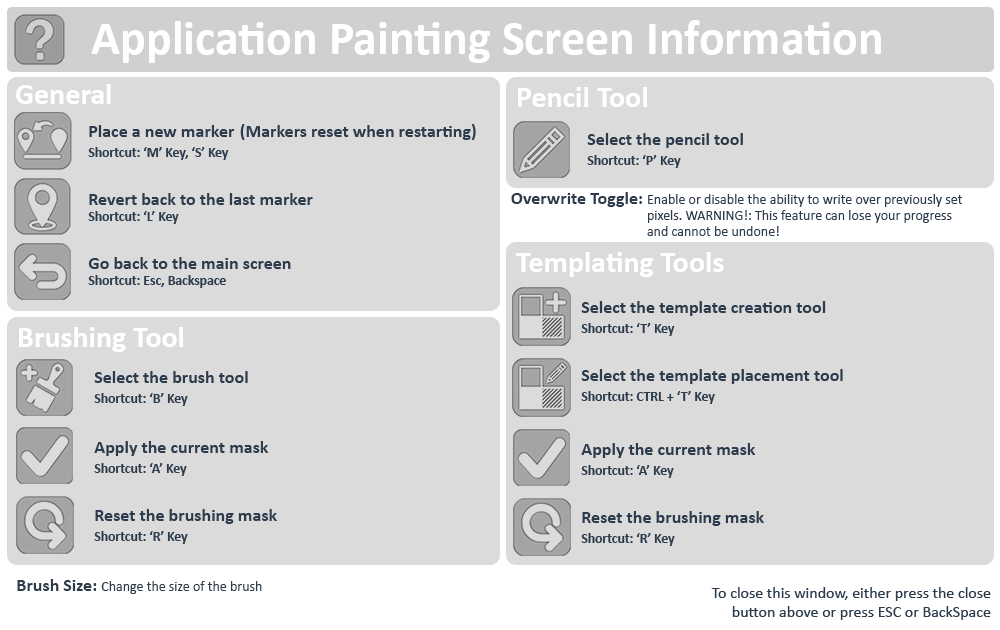
<style>
.page{position:relative;width:1000px;height:630px;background:#dbdbdb}
.page>*{position:absolute;margin:0}
.t1{font:48px "Calibri-Bold";color:#ffffff}
.t2{font:30px "Calibri-Bold";color:#ffffff}
.t3{font:18px/20.4px "Calibri-Bold";color:#2c3c4c}
.t4{font:13.6px/20.4px "Calibri-Bold";color:#2c3c4c}
.t5{font:18px "Calibri-Bold";color:#2c3c4c}
.t6{font:13.6px "Calibri-Bold";color:#2c3c4c}
.t7{font:14px/16px "Calibri";color:#2c3c4c}
.t8{font:18px/16px "Calibri-Bold";color:#2c3c4c}
.t9{font:14px "Calibri";color:#2c3c4c}
.t10{font:16px "Calibri";color:#2c3c4c}
</style>
<div class="page">
<p class="t1" style="left:91px;top:20px;width:790px;height:43px">Application Painting Screen Information</p>
<p class="t2" style="left:16px;top:84px;width:95px;height:20px">General</p>
<p class="t2" style="left:518px;top:87px;width:129px;height:20px">Pencil Tool</p>
<p class="t3" style="left:88px;top:124px;width:388px;height:36px">Place a new marker (Markers reset when restarting)<br><span class="t4">Shortcut: ‘M’ Key, ‘S’ Key</span></p>
<p class="t3" style="left:587px;top:133px;width:156px;height:35px">Select the pencil tool<br><span class="t4">Shortcut: ‘P’ Key</span></p>
<p class="t5" style="left:88px;top:193px;width:225px;height:31px">Revert back to the last marker<br><span class="t6">Shortcut: ‘L’ Key</span></p>
<p class="t7" style="left:511px;top:192px;width:452px;height:44px"><span class="t8">Overwrite Toggle: </span>Enable or disable the ability to write over previously set<br>                                           pixels. WARNING!: This feature can lose your progress<br>                                           and cannot be undone!</p>
<p class="t5" style="left:88px;top:257px;width:203px;height:31px">Go back to the main screen<br><span class="t6">Shortcut: Esc, Backspace</span></p>
<p class="t2" style="left:516px;top:252px;width:208px;height:25px">Templating Tools</p>
<p class="t3" style="left:581px;top:301px;width:245px;height:35px">Select the template creation tool<br><span class="t4">Shortcut: ‘T’ Key</span></p>
<p class="t2" style="left:19px;top:327px;width:164px;height:25px">Brushing Tool</p>
<p class="t3" style="left:94px;top:371px;width:154px;height:35px">Select the brush tool<br><span class="t4">Shortcut: ‘B’ Key</span></p>
<p class="t3" style="left:581px;top:369px;width:262px;height:35px">Select the template placement tool<br><span class="t4">Shortcut: CTRL + ‘T’ Key</span></p>
<p class="t3" style="left:94px;top:441px;width:175px;height:35px">Apply the current mask<br><span class="t4">Shortcut: ‘A’ Key</span></p>
<p class="t3" style="left:581px;top:443px;width:175px;height:35px">Apply the current mask<br><span class="t4">Shortcut: ‘A’ Key</span></p>
<p class="t3" style="left:94px;top:509px;width:183px;height:35px">Reset the brushing mask<br><span class="t4">Shortcut: ‘R’ Key</span></p>
<p class="t3" style="left:581px;top:511px;width:183px;height:35px">Reset the brushing mask<br><span class="t4">Shortcut: ‘R’ Key</span></p>
<p class="t9" style="left:17px;top:579px;width:245px;height:15px"><span class="t5">Brush Size: </span>Change the size of the brush</p>
<p class="t10" style="left:711px;top:587px;width:280px;height:33px;text-align:right">To close this window, either press the close<br>button above or press ESC or BackSpace</p>
</div>
